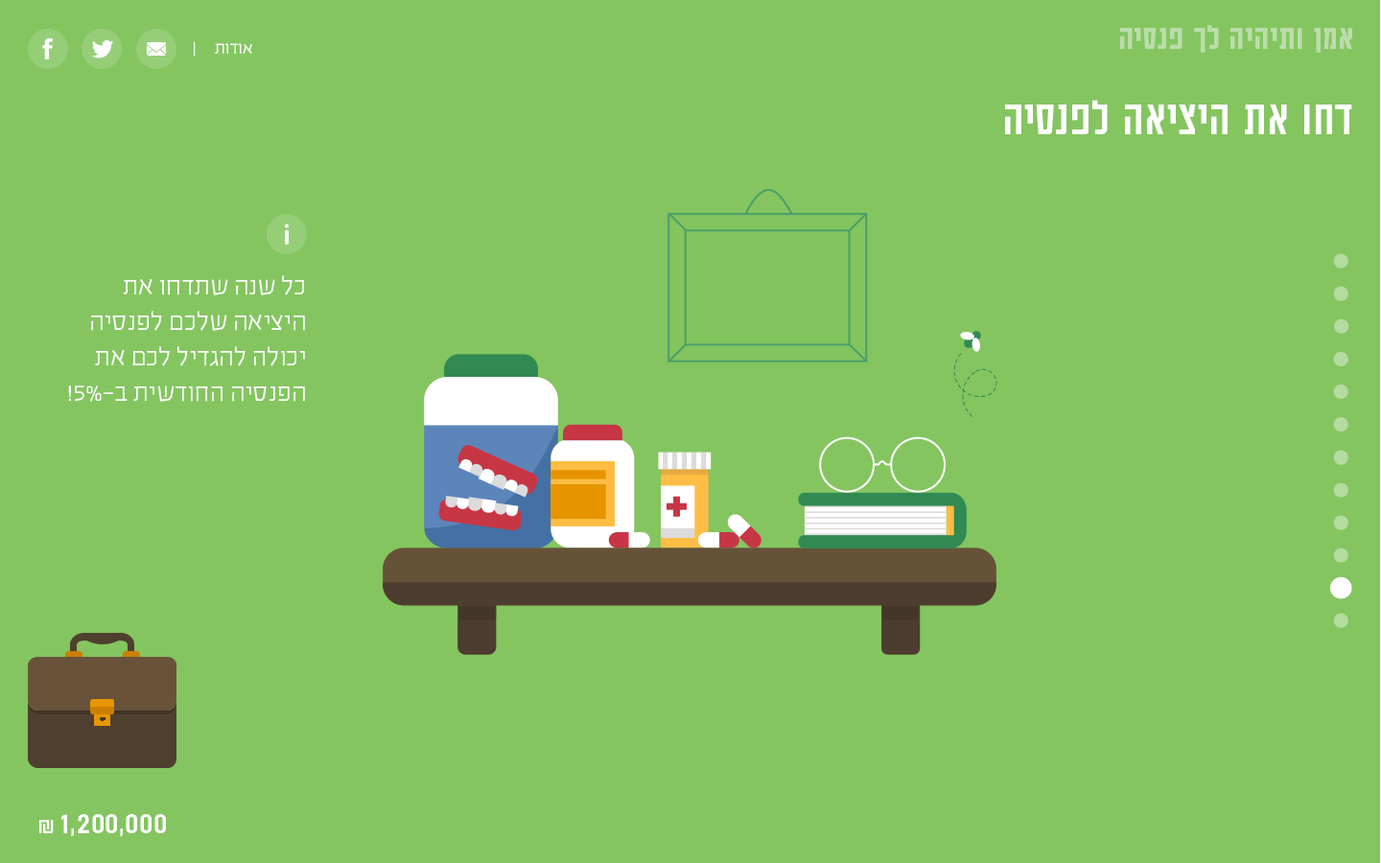
<style>
.page{position:relative;width:1381px;height:863px;background:#84c560}
.page>*{position:absolute;margin:0}
.t1{font:37.8px "AdumaFOT-Medium";color:#bbddab}
.t2{font:19.2px "EzerBlock_OE-Light";color:#ffffff}
.t3{font:53.8px "AdumaFOT-Regular";color:#ffffff}
.t4{font:28.8px/35.5px "EzerBlock_OE-Light";color:#ffffff}
.t5{font:33.6px "AdumaFOT-Regular";color:#ffffff}
.t6{font:24px "AdumaFOT-Regular";color:#ffffff}
</style>
<div class="page">
<p class="t1" style="left:1120px;top:25px;width:232px;height:28px">אמן ותיהיה לך פנסיה</p>
<p class="t2" style="left:194px;top:41px;width:58px;height:16px">אודות     |</p>
<p class="t3" style="left:1005px;top:100px;width:347px;height:34px">דחו את היציאה לפנסיה</p>
<p class="t4" style="left:68px;top:275px;width:237px;height:127px">כל שנה שתדחו את היציאה שלכם לפנסיה יכולה להגדיל לכם את הפנסיה החודשית ב-5%!</p>
<p class="t5" style="left:39px;top:814px;width:127px;height:23px">1,200,000<span class="t6"> ₪</span></p>
</div>
